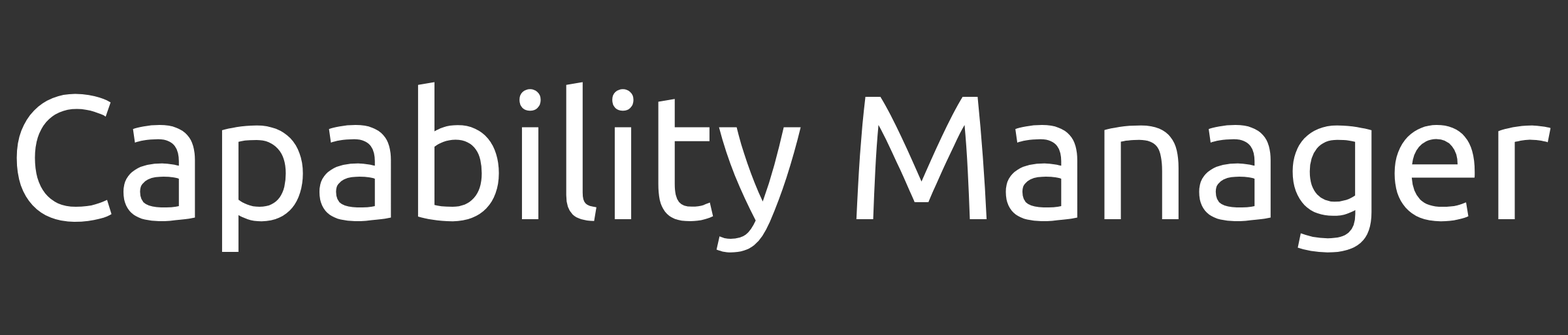
<style>
.page{position:relative;width:1568px;height:335px;background:#333333}
.page>*{position:absolute;margin:0}
.t1{font:176.4px "Ubuntu-Regular";color:#ffffff}
</style>
<div class="page">
<p class="t1" style="left:16px;top:82px;width:1535px;height:170px">Capability Manager</p>
</div>
